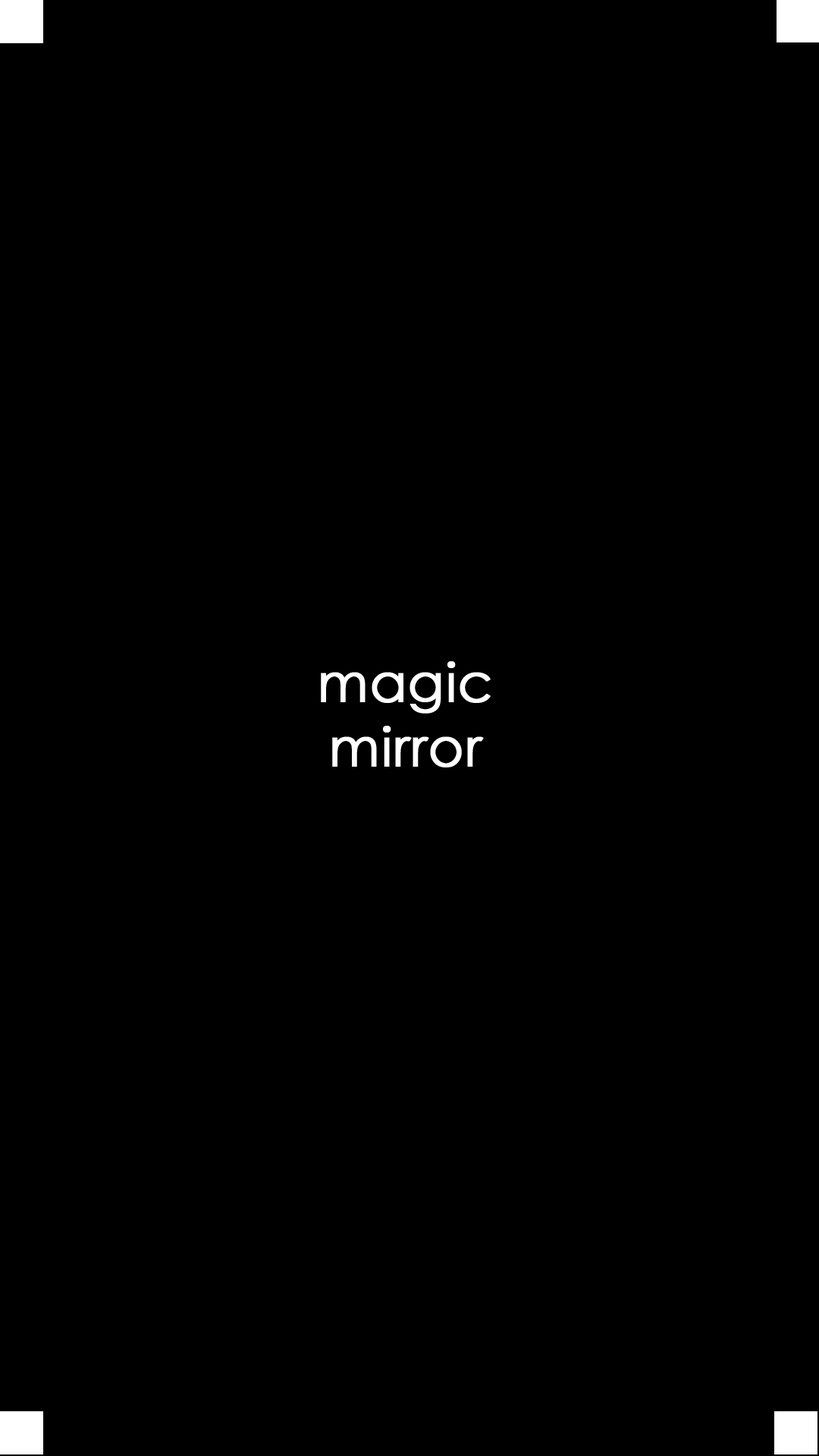
<style>
.page{position:relative;width:819px;height:1456px;background:#000000}
.page>*{position:absolute;margin:0}
.t1{font:53.7px "CenturyGothic";color:#ffffff;font-weight:bold}
</style>
<div class="page">
<p class="t1" style="left:321px;top:661px;width:170px;height:106px;text-align:center">magic<br>mirror</p>
</div>
